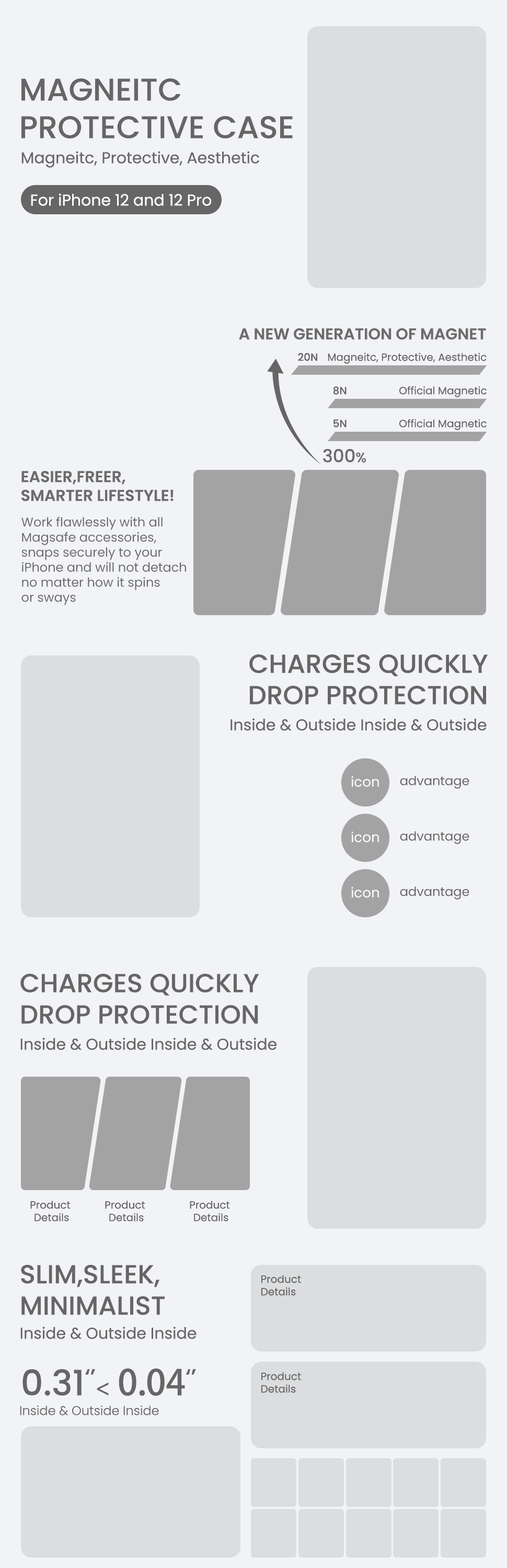
<style>
.page{position:relative;width:507px;height:1568px;background:#f2f3f6}
.page>*{position:absolute;margin:0}
.t1{font:31.4px "Poppins-Medium";color:#666666;text-transform:uppercase}
.t2{font:15.7px "Poppins-Regular";color:#666666}
.t3{font:15.7px "Poppins-Regular";color:#ffffff}
.t4{font:15.7px "Poppins-SemiBold";color:#6c6c6c;text-transform:uppercase}
.t5{font:10.5px "Poppins-Medium";color:#666666;text-transform:uppercase}
.t6{font:10.5px "Poppins-Regular";color:#666666}
.t7{font:17.8px "Poppins-Medium";color:#6c6c6c;text-transform:uppercase}
.t8{font:13.6px "Poppins-Medium";color:#6c6c6c;text-transform:uppercase}
.t9{font:12.5px "Poppins-Regular";color:#6c6c6c}
.t10{font:26.1px "Poppins-Medium";color:#666666;text-transform:uppercase}
.t11{font:13.6px "Poppins-Regular";color:#ffffff}
.t12{font:12.5px "Poppins-Regular";color:#666666}
.t13{font:35.1px "Poppins-Medium";color:#666666;text-transform:uppercase}
.t14{font:22.5px "Poppins-Medium";color:#666666;text-transform:uppercase}
.t15{font:21px "AdobeHeitiStd-Regular";color:#666666;text-transform:uppercase}
.t16{font:35.1px "AdobeHeitiStd-Regular";color:#666666;text-transform:uppercase}
.t17{font:12.5px "Poppins-Light";color:#666666}
</style>
<div class="page">
<p class="t1" style="left:21px;top:78px;width:272px;height:61px">Magneitc<br>Protective Case</p>
<p class="t2" style="left:21px;top:151px;width:238px;height:17px">Magneitc, Protective, Aesthetic</p>
<p class="t3" style="left:31px;top:193px;width:181px;height:13px">For iPhone 12 and 12 Pro</p>
<p class="t4" style="left:239px;top:328px;width:247px;height:12px">A New Generation of Magnet</p>
<p class="t5" style="left:298px;top:353px;width:19px;height:8px">20N</p>
<p class="t6" style="left:328px;top:353px;width:159px;height:11px">Magneitc, Protective, Aesthetic</p>
<p class="t5" style="left:333px;top:386px;width:14px;height:9px">8N</p>
<p class="t6" style="left:399px;top:386px;width:88px;height:11px">Official Magnetic</p>
<p class="t5" style="left:333px;top:419px;width:14px;height:9px">5N</p>
<p class="t6" style="left:399px;top:419px;width:88px;height:11px">Official Magnetic</p>
<p class="t7" style="left:323px;top:449px;width:43px;height:14px">300<span class="t8">%</span></p>
<p class="t4" style="left:21px;top:471px;width:153px;height:30px">Easier,Freer, <br>Smarter lifestyle!</p>
<p class="t9" style="left:21px;top:517px;width:165px;height:88px">Work flawlessly with all<br>Magsafe accessories,<br>snaps securely to your<br>iPhone and will not detach<br>no matter how it spins<br>or sways</p>
<p class="t10" style="left:249px;top:654px;width:239px;height:51px;text-align:right">Charges Quickly<br>Drop Protection</p>
<p class="t2" style="left:230px;top:718px;width:257px;height:13px">Inside &amp; Outside Inside &amp; Outside</p>
<p class="t11" style="left:351px;top:776px;width:28px;height:11px">icon</p>
<p class="t12" style="left:400px;top:776px;width:69px;height:13px">advantage</p>
<p class="t11" style="left:351px;top:832px;width:28px;height:11px">icon</p>
<p class="t12" style="left:400px;top:831px;width:69px;height:13px">advantage</p>
<p class="t11" style="left:351px;top:887px;width:28px;height:11px">icon</p>
<p class="t12" style="left:400px;top:886px;width:69px;height:14px">advantage</p>
<p class="t10" style="left:20px;top:974px;width:239px;height:50px">Charges Quickly<br>Drop Protection</p>
<p class="t2" style="left:20px;top:1037px;width:256px;height:13px">Inside &amp; Outside Inside &amp; Outside</p>
<p class="t6" style="left:30px;top:1201px;width:41px;height:20px;text-align:center">Product <br>Details</p>
<p class="t6" style="left:105px;top:1201px;width:40px;height:20px;text-align:center">Product <br>Details</p>
<p class="t6" style="left:190px;top:1201px;width:40px;height:20px;text-align:center">Product <br>Details</p>
<p class="t10" style="left:21px;top:1265px;width:144px;height:50px">Slim,sleek,<br>Minimalist</p>
<p class="t6" style="left:261px;top:1275px;width:40px;height:21px">Product <br>Details</p>
<p class="t2" style="left:20px;top:1327px;width:177px;height:12px">Inside &amp; Outside Inside</p>
<p class="t13" style="left:22px;top:1368px;width:174px;height:28px">0.31<span class="t14">‘’</span><span class="t15">&lt;</span><span class="t16"> 0.04</span><span class="t14">‘’</span></p>
<p class="t6" style="left:261px;top:1372px;width:40px;height:21px">Product <br>Details</p>
<p class="t17" style="left:20px;top:1405px;width:139px;height:10px">Inside &amp; Outside Inside</p>
</div>
